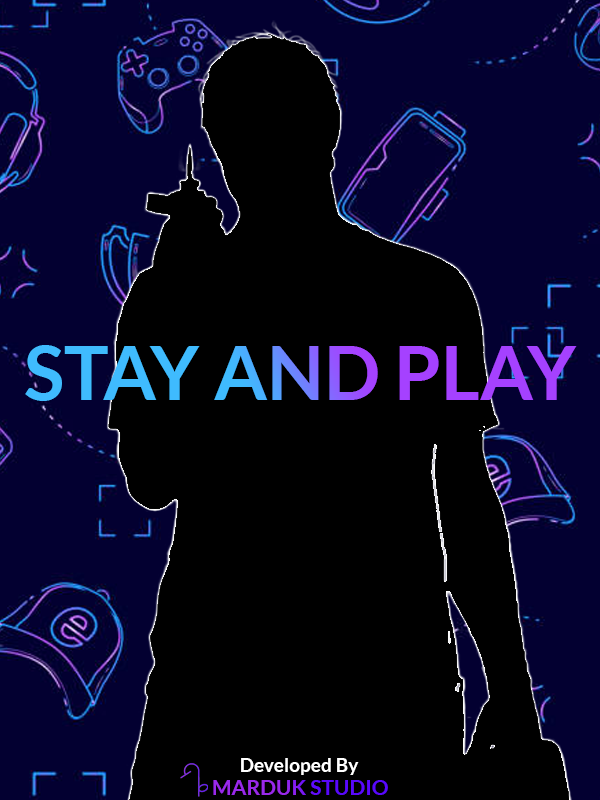
<style>
.page{position:relative;width:600px;height:800px;background:#000000}
.page>*{position:absolute;margin:0}
.t1{font:75.2px "Lato-Bold"}
.t2{font:19.1px "Lato-Bold";color:#ffffff}
.t3{font:21.1px "Lato-Bold"}
</style>
<div class="page">
<p class="t1" style="left:25px;top:345px;width:552px;height:56px">STAY AND PLAY</p>
<p class="t2" style="left:241px;top:758px;width:118px;height:17px">Developed By</p>
<p class="t3" style="left:213px;top:780px;width:175px;height:15px">MARDUK STUDIO</p>
</div>
